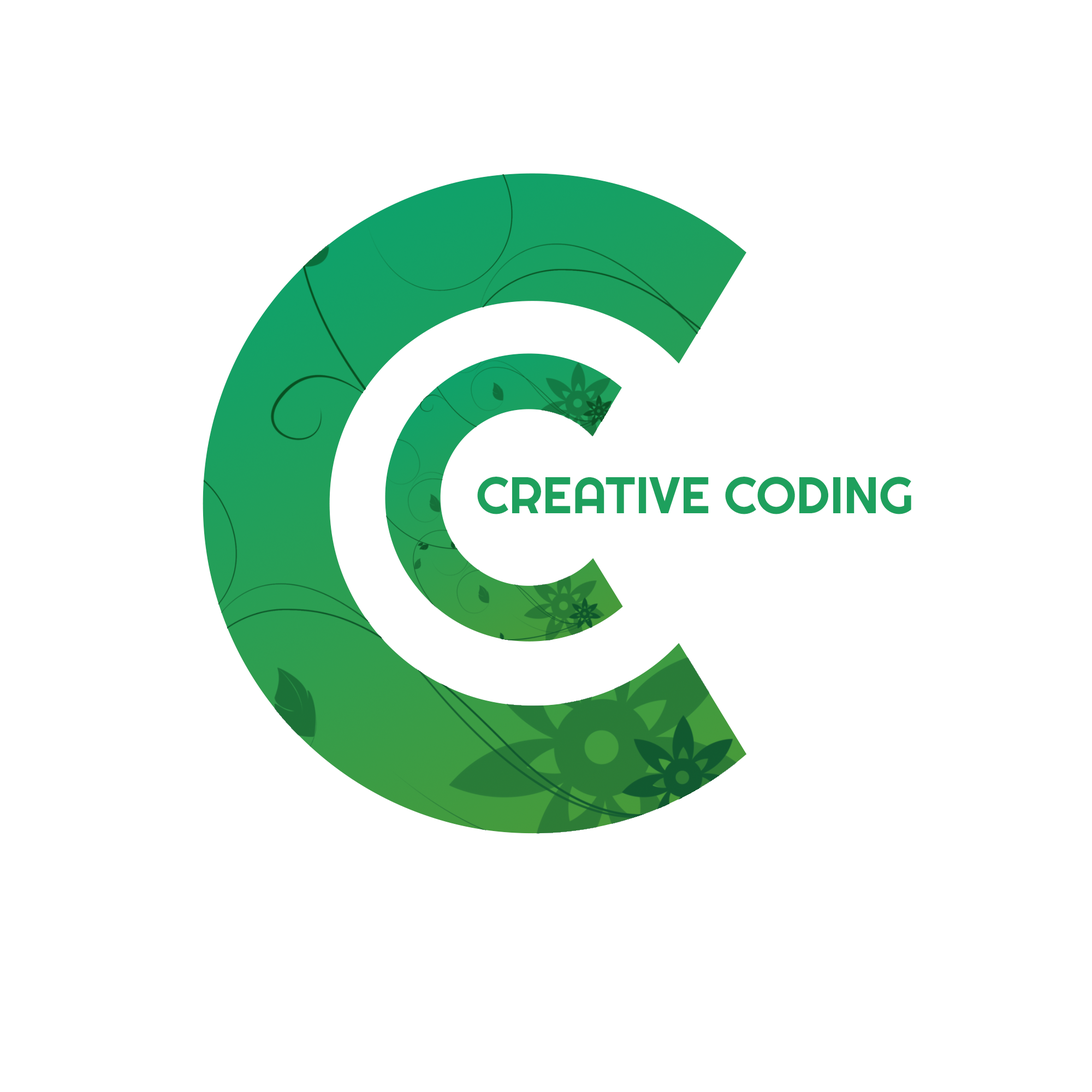
<style>
.page{position:relative;width:1092px;height:1092px;background:#ffffff}
.page>*{position:absolute;margin:0}
.t1{font:910px "Righteous-Regular"}
.t2{font:397.1px "Righteous-Regular"}
.t3{font:51.4px "Righteous-Regular";color:#1ea05d}
</style>
<div class="page">
<p class="t1" style="left:203px;top:173px;width:544px;height:661px">C</p>
<p class="t2" style="left:385px;top:353px;width:238px;height:289px">C</p>
<p class="t3" style="left:477px;top:477px;width:434px;height:37px">CREATIVE CODING</p>
</div>
